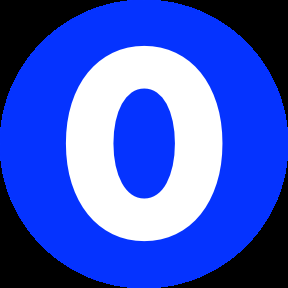
<style>
.page{position:relative;width:288px;height:288px;background:#0533ff}
.page>*{position:absolute;margin:0}
.t1{font:245px "Futura-Bold";color:#ffffff}
</style>
<div class="page">
<p class="t1" style="left:65px;top:45px;width:158px;height:197px">0</p>
</div>
